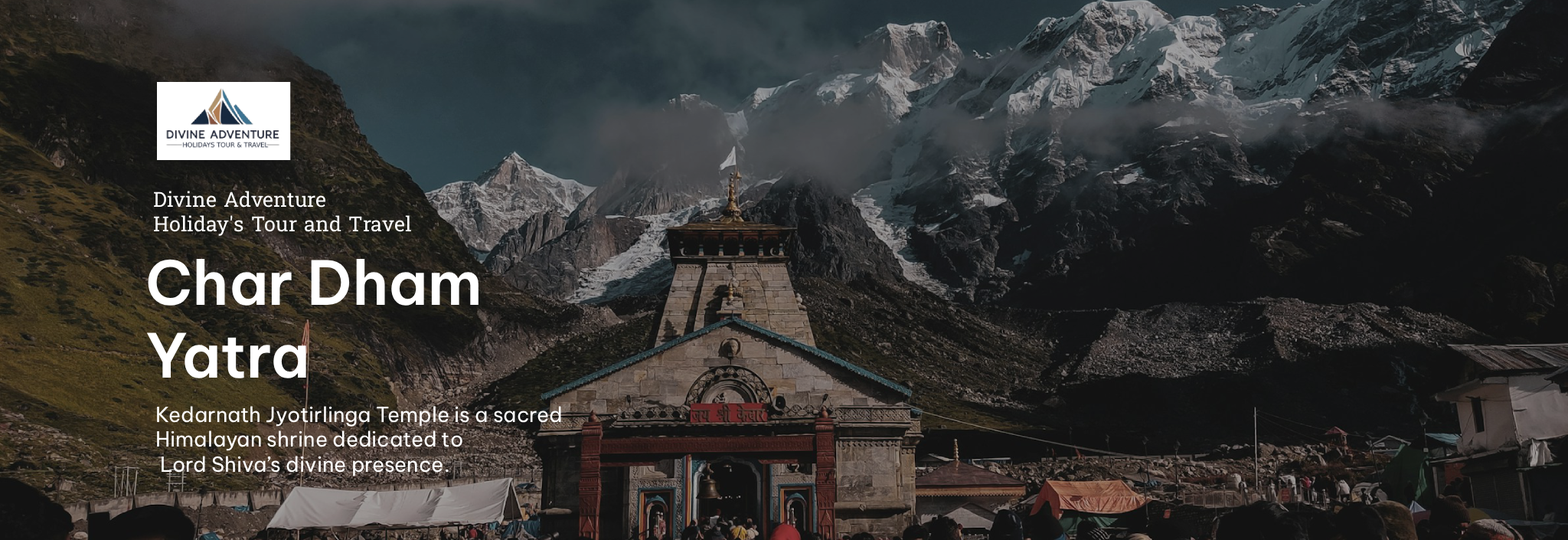
<style>
.page{position:relative;width:1568px;height:540px}
.page>*{position:absolute;margin:0}
.t1{font:20.7px "Battambang-Regular";color:#ffffff}
.t2{font:60.5px "BeVietnamPro-SemiBold";color:#ffffff}
.t3{font:20.7px "BeVietnamPro-Regular";color:#ffffff}
</style>
<div class="page">
<p class="t1" style="left:154px;top:191px;width:257px;height:45px">Divine Adventure<br>Holiday's Tour and Travel</p>
<p class="t2" style="left:146px;top:258px;width:333px;height:120px">Char Dham<br>Yatra</p>
<p class="t3" style="left:157px;top:406px;width:404px;height:70px">Kedarnath Jyotirlinga Temple is a sacred <br>Himalayan shrine dedicated to<br> Lord Shiva’s divine presence.</p>
</div>
